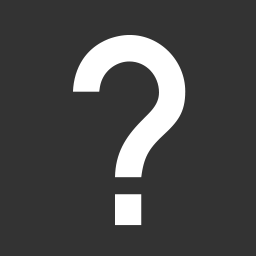
<style>
.page{position:relative;width:256px;height:256px;background:#333333}
.page>*{position:absolute;margin:0}
.t1{font:251.7px "ITCAvantGardePro-Md";letter-spacing:0.02em;color:#ffffff;text-transform:uppercase}
</style>
<div class="page">
<p class="t1" style="left:72px;top:35px;width:114px;height:191px">?</p>
</div>
